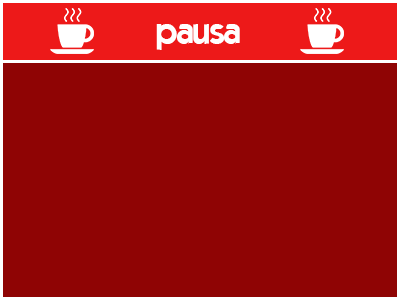
<style>
.page{position:relative;width:400px;height:300px;background:#8f0404}
.page>*{position:absolute;margin:0}
.t1{font:36px "ELEGANCE";color:#ffffff}
</style>
<div class="page">
<p class="t1" style="left:156px;top:24px;width:84px;height:26px">pausa</p>
</div>
